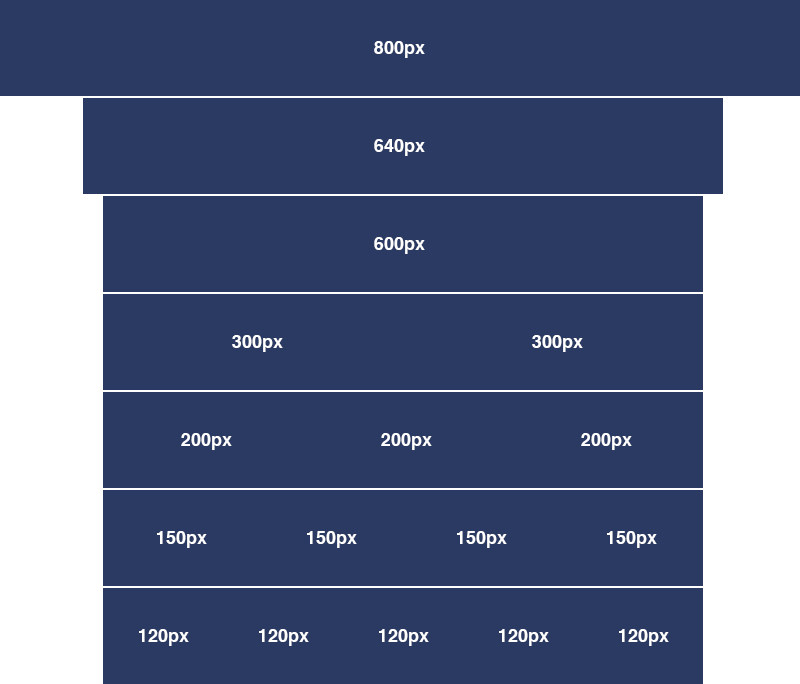
<style>
.page{position:relative;width:800px;height:684px;background:#2b3a63}
.page>*{position:absolute;margin:0}
.t1{font:18px "Helvetica-Bold";color:#ffffff}
</style>
<div class="page">
<p class="t1" style="left:374px;top:41px;width:51px;height:17px">800px</p>
<p class="t1" style="left:374px;top:139px;width:51px;height:17px">640px</p>
<p class="t1" style="left:374px;top:237px;width:51px;height:17px">600px</p>
<p class="t1" style="left:232px;top:335px;width:51px;height:17px">300px</p>
<p class="t1" style="left:532px;top:335px;width:51px;height:17px">300px</p>
<p class="t1" style="left:181px;top:433px;width:51px;height:17px">200px</p>
<p class="t1" style="left:381px;top:433px;width:51px;height:17px">200px</p>
<p class="t1" style="left:581px;top:433px;width:51px;height:17px">200px</p>
<p class="t1" style="left:157px;top:531px;width:50px;height:17px">150px</p>
<p class="t1" style="left:307px;top:531px;width:50px;height:17px">150px</p>
<p class="t1" style="left:457px;top:531px;width:50px;height:17px">150px</p>
<p class="t1" style="left:607px;top:531px;width:50px;height:17px">150px</p>
<p class="t1" style="left:139px;top:629px;width:50px;height:17px">120px</p>
<p class="t1" style="left:259px;top:629px;width:50px;height:17px">120px</p>
<p class="t1" style="left:379px;top:629px;width:50px;height:17px">120px</p>
<p class="t1" style="left:499px;top:629px;width:50px;height:17px">120px</p>
<p class="t1" style="left:619px;top:629px;width:50px;height:17px">120px</p>
</div>
